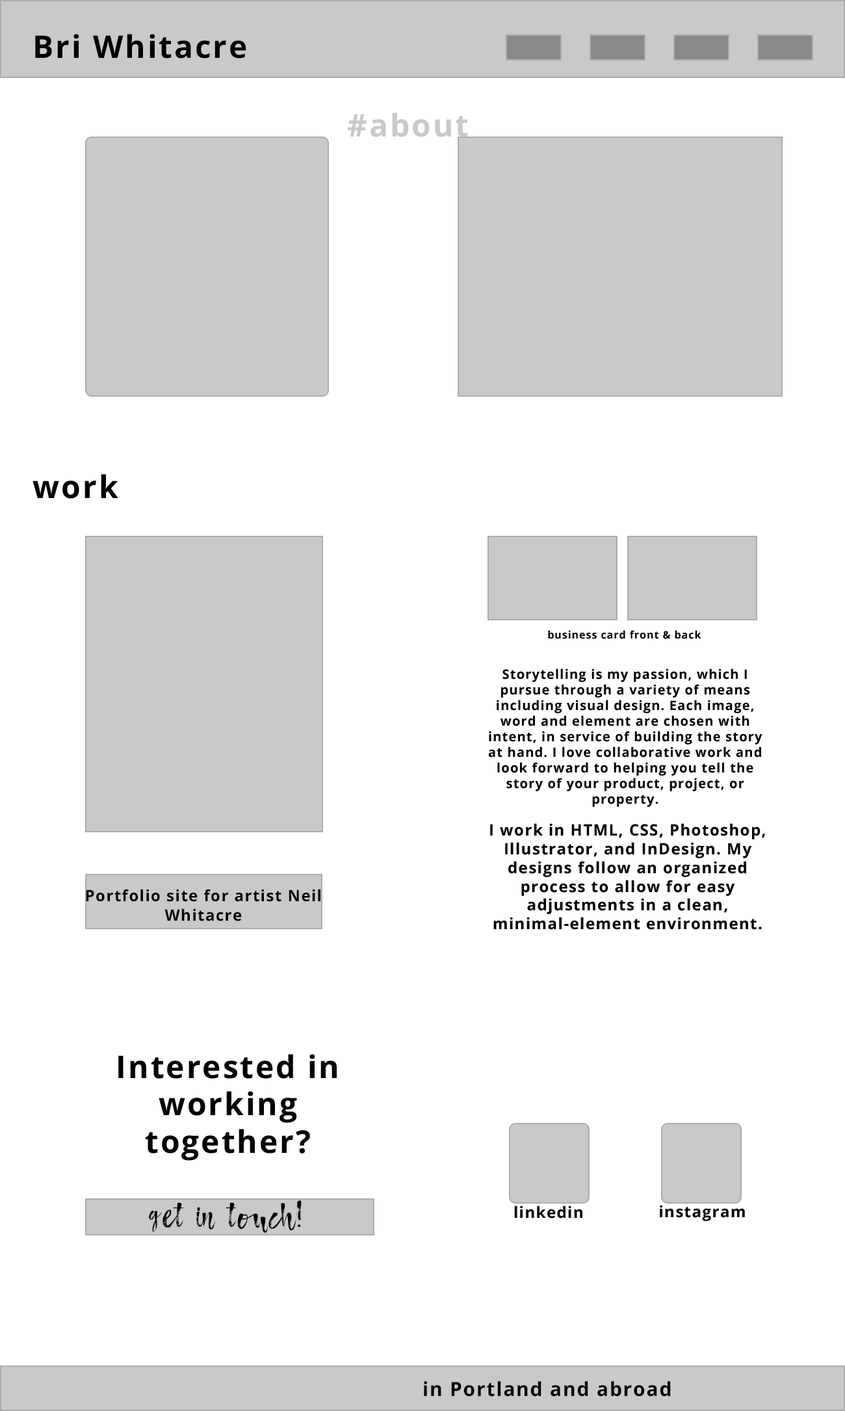
<style>
.page{position:relative;width:845px;height:1411px;background:#ffffff}
.page>*{position:absolute;margin:0}
.t1{font:31.2px "OpenSans-Bold";letter-spacing:0.06em;color:#000000}
.t2{font:31.2px "OpenSans-Bold";letter-spacing:0.06em;color:#c9c9c9}
.t3{font:10.4px "OpenSans-Bold";letter-spacing:0.06em;color:#000000}
.t4{font:13px "OpenSans-Bold";letter-spacing:0.06em;color:#000000}
.t5{font:15.6px "OpenSans-Bold";letter-spacing:0.06em;color:#000000}
.t6{font:15.6px/19.5px "OpenSans-Bold";letter-spacing:0.06em;color:#000000}
.t7{font:31.2px "AtmosphereScriptTypeface";letter-spacing:0.06em;color:#000000}
.t8{font:19.5px "OpenSans-Bold";letter-spacing:0.06em;color:#000000}
</style>
<div class="page">
<p class="t1" style="left:35px;top:34px;width:211px;height:25px">Bri Whitacre</p>
<p class="t2" style="left:348px;top:112px;width:120px;height:25px">#about</p>
<p class="t1" style="left:33px;top:474px;width:85px;height:25px">work</p>
<p class="t3" style="left:548px;top:630px;width:154px;height:9px">business card front &amp; back</p>
<p class="t4" style="left:488px;top:668px;width:275px;height:139px;text-align:center">Storytelling is my passion, which I pursue through a variety of means including visual design. Each image, word and element are chosen with intent, in service of building the story at hand. I love collaborative work and look forward to helping you tell the story of your product, project, or property.</p>
<p class="t5" style="left:490px;top:823px;width:275px;height:107px;text-align:center">I work in HTML, CSS, Photoshop, Illustrator, and InDesign. My designs follow an organized process to allow for easy adjustments in a clean, minimal-element environment.</p>
<p class="t6" style="left:86px;top:889px;width:235px;height:32px;text-align:center">Portfolio site for artist Neil Whitacre</p>
<p class="t1" style="left:118px;top:1054px;width:219px;height:107px;text-align:center">Interested in working together?</p>
<p class="t7" style="left:149px;top:1200px;width:153px;height:33px">get in touch!</p>
<p class="t5" style="left:514px;top:1205px;width:69px;height:13px">linkedin</p>
<p class="t5" style="left:660px;top:1205px;width:85px;height:16px">instagram</p>
<p class="t8" style="left:424px;top:1381px;width:247px;height:16px">in Portland and abroad</p>
</div>
